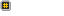
<style>
.page{position:relative;width:64px;height:16px;background:#ffffff}
.page>*{position:absolute;margin:0}
.t1{font:8px "04b03";color:#f0be00;text-transform:uppercase}
</style>
<div class="page">
<p class="t1" style="left:3px;top:3px;width:5px;height:5px">#</p>
</div>
